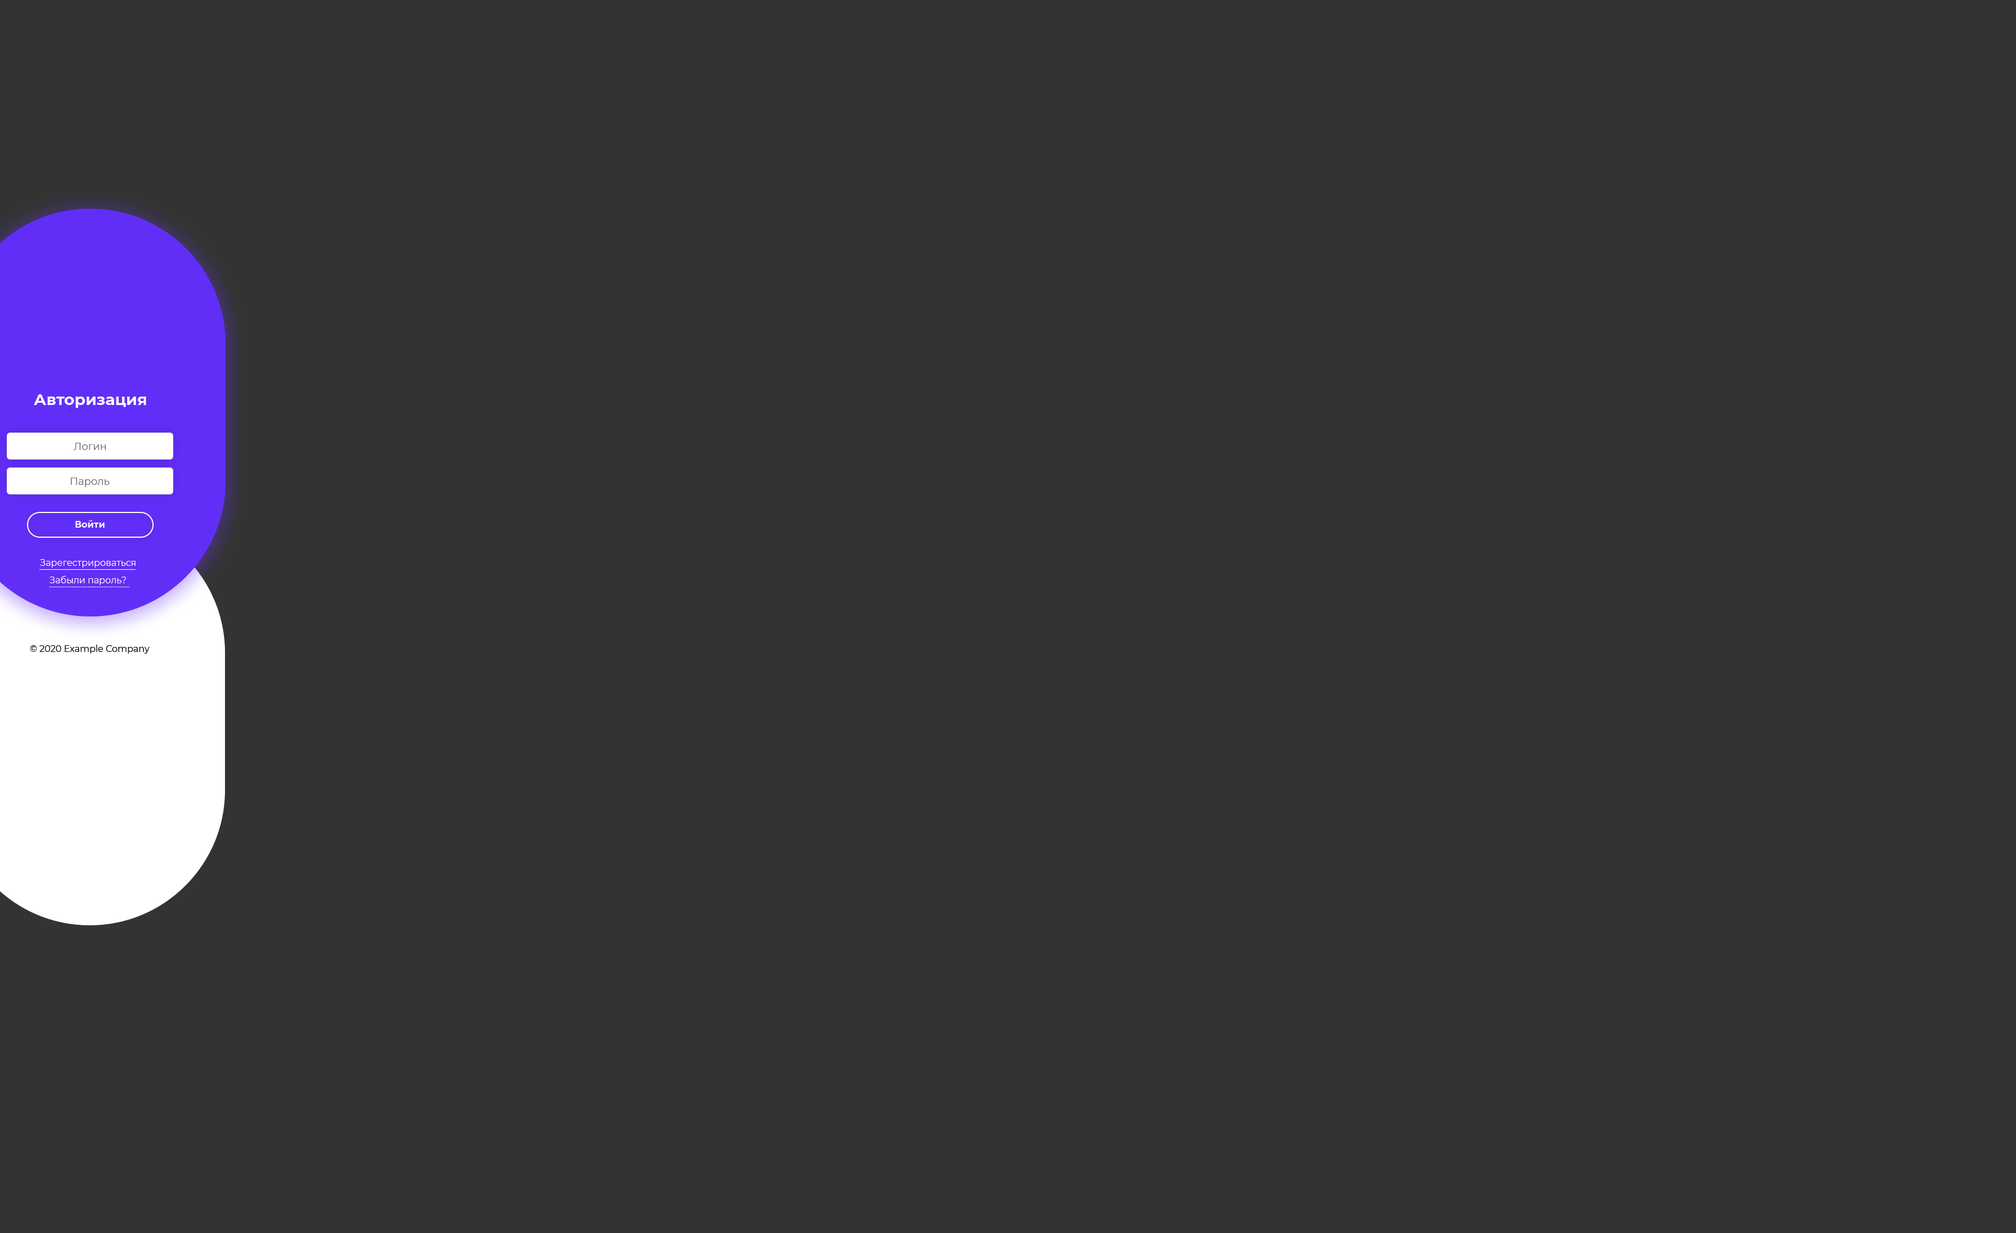
<style>
.page{position:relative;width:2016px;height:1233px;background:#333333}
.page>*{position:absolute;margin:0}
.t1{font:15.7px "Montserrat-Bold";color:#ffffff}
.t2{font:10.1px "Montserrat-Regular";color:#737373}
.t3{font:9px "Montserrat-Bold";color:#ffffff}
.t4{font:9px "Montserrat-Regular";color:#ffffff}
.t5{font:9px "Montserrat-Regular";color:#000000}
</style>
<div class="page">
<p class="t1" style="left:34px;top:394px;width:112px;height:14px">Авторизация</p>
<p class="t2" style="left:74px;top:443px;width:32px;height:7px">Логин</p>
<p class="t2" style="left:71px;top:478px;width:39px;height:9px">Пароль</p>
<p class="t3" style="left:75px;top:520px;width:30px;height:8px">Войти</p>
<p class="t4" style="left:40px;top:559px;width:96px;height:9px">Зарегестрироваться</p>
<p class="t4" style="left:50px;top:575px;width:76px;height:10px">Забыли пароль?</p>
<p class="t5" style="left:30px;top:645px;width:120px;height:9px">© 2020 Example Company</p>
</div>
